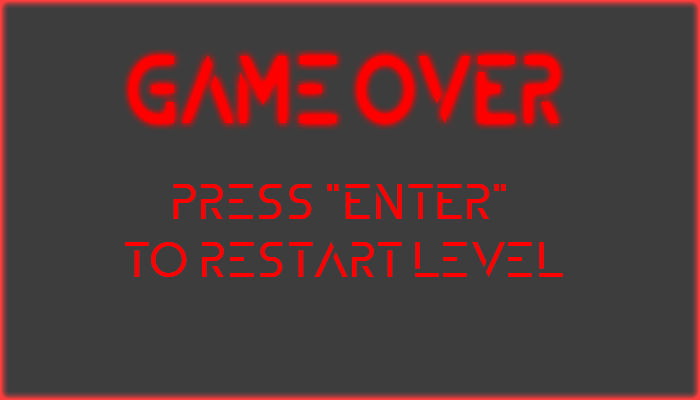
<style>
.page{position:relative;width:700px;height:400px;background:#3d3d3d}
.page>*{position:absolute;margin:0}
.t1{font:92px "ZELDA";color:#ff0000;scale:0.81 1}
.t2{font:48px "ZELDA";color:#ff0000}
</style>
<div class="page">
<p class="t1" style="left:129px;top:55px;width:431px;height:68px">Game OVER</p>
<p class="t2" style="left:125px;top:184px;width:438px;height:93px;text-align:center">Press "ENTER" <br>to restart level</p>
</div>
